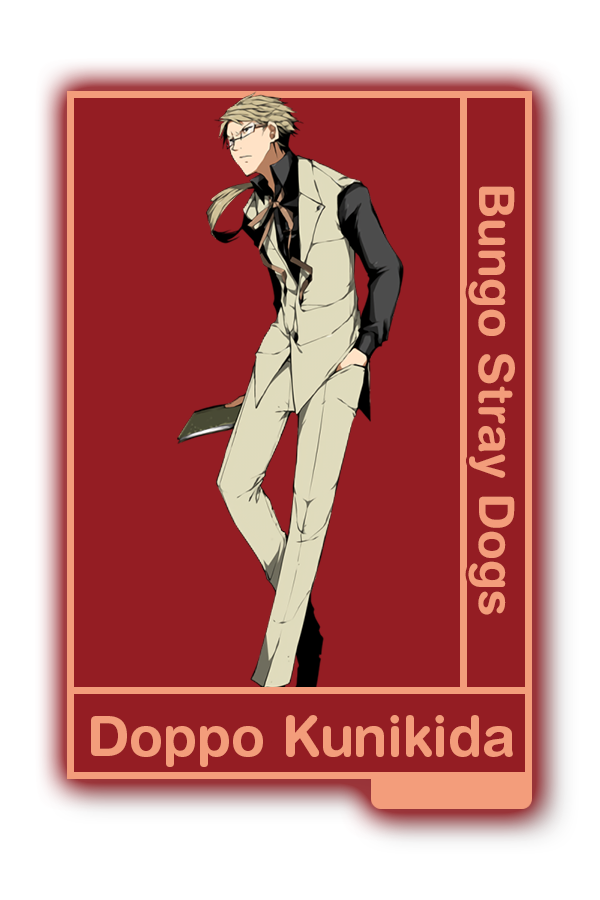
<style>
.page{position:relative;width:600px;height:900px;background:#941d23}
.page>*{position:absolute;margin:0}
.t1{font:48.8px "HelveticaRounded-Bold";color:#f39d7b}
.t2{font:55.4px "HelveticaRounded-Bold";color:#f39d7b}
</style>
<div class="page">
<p class="t1" style="left:468px;top:186px;width:47px;height:429px;rotate:90deg">Bungo Stray Dogs</p>
<p class="t2" style="left:91px;top:715px;width:422px;height:52px">Doppo Kunikida</p>
</div>
